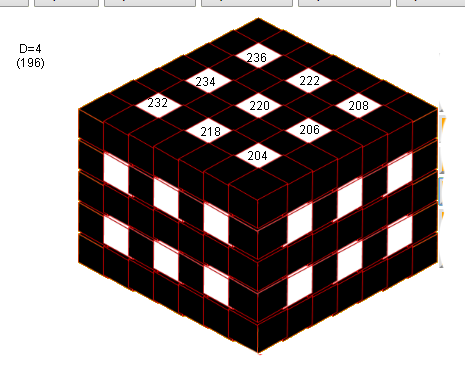
<style>
.page{position:relative;width:465px;height:382px;background:#ffffff}
.page>*{position:absolute;margin:0}
.t1{font:12px "ArialMT";color:#000000}
</style>
<div class="page">
<p class="t1" style="left:17px;top:44px;width:27px;height:25px;text-align:center">D=4<br>(196)</p>
<p class="t1" style="left:247px;top:53px;width:19px;height:9px">236</p>
<p class="t1" style="left:196px;top:77px;width:19px;height:9px">234</p>
<p class="t1" style="left:300px;top:76px;width:19px;height:9px">222</p>
<p class="t1" style="left:148px;top:98px;width:19px;height:9px">232</p>
<p class="t1" style="left:250px;top:101px;width:19px;height:9px">220</p>
<p class="t1" style="left:349px;top:101px;width:19px;height:9px">208</p>
<p class="t1" style="left:300px;top:125px;width:19px;height:9px">206</p>
<p class="t1" style="left:201px;top:127px;width:19px;height:9px">218</p>
<p class="t1" style="left:248px;top:151px;width:19px;height:9px">204</p>
</div>
